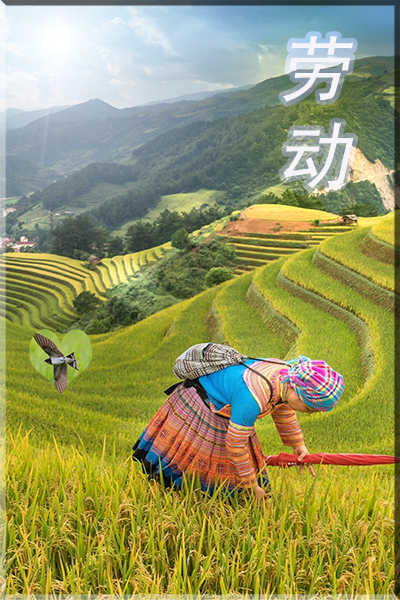
<style>
.page{position:relative;width:400px;height:600px}
.page>*{position:absolute;margin:0}
.t1{font:72px "SimHei";letter-spacing:0.2em;color:#f5f4f9;font-style:italic}
</style>
<div class="page">
<p class="t1" style="left:283px;top:36px;width:71px;height:153px">劳动</p>
</div>
